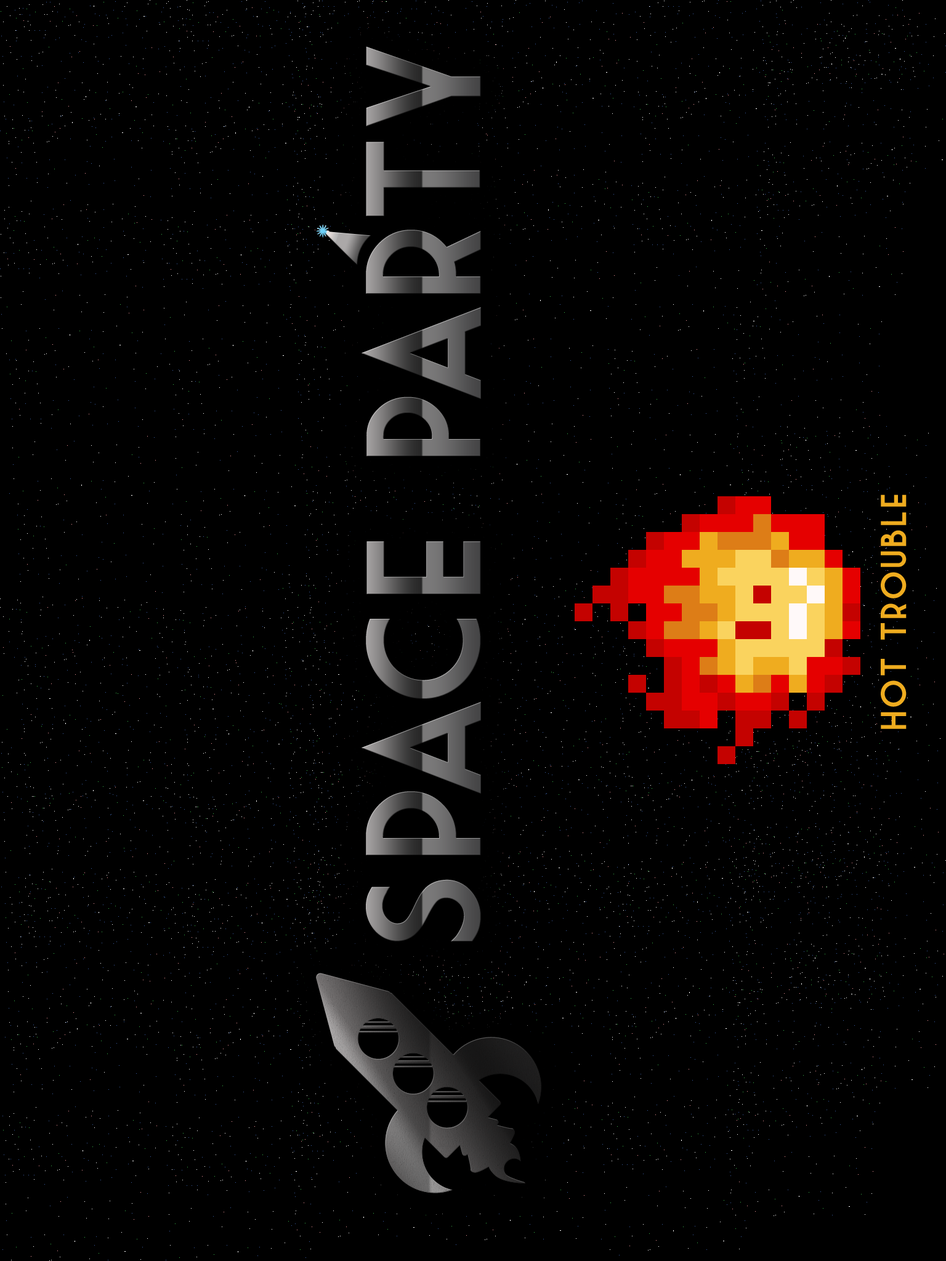
<style>
.page{position:relative;width:946px;height:1261px;background:#000000}
.page>*{position:absolute;margin:0}
.t1{font:158.2px "MarketDeco";letter-spacing:0.04em}
.t2{font:35.1px "MarketDeco";letter-spacing:0.04em;color:#efac1f}
</style>
<div class="page">
<p class="t1" style="left:361px;top:46px;width:120px;height:895px;rotate:-90deg">Space Party</p>
<p class="t2" style="left:880px;top:494px;width:26px;height:235px;rotate:-90deg">Hot trouble</p>
</div>
